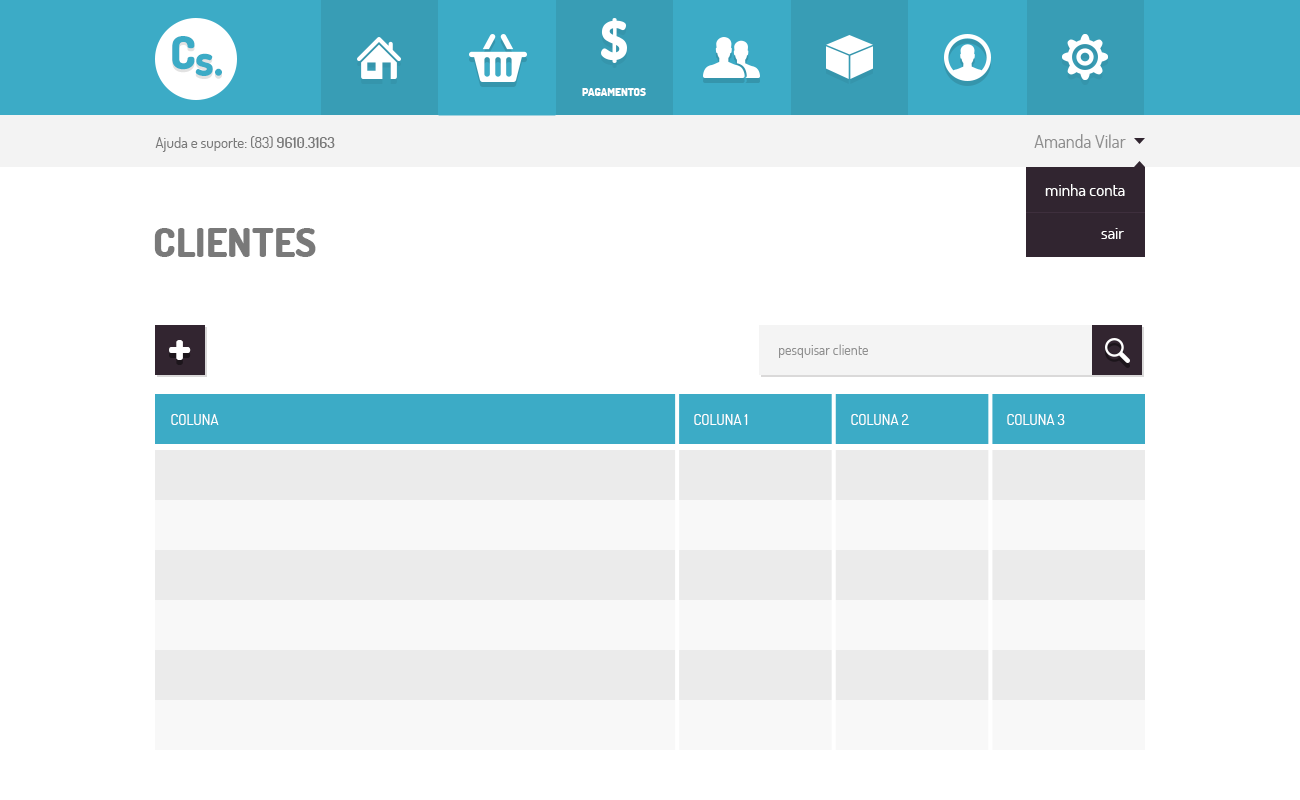
<style>
.page{position:relative;width:1300px;height:800px;background:#ffffff}
.page>*{position:absolute;margin:0}
.t1{font:11px "Dosis-ExtraBold";color:#ffffff;text-transform:uppercase}
.t2{font:15px "Dosis-Regular";color:#797979}
.t3{font:15px "Dosis-SemiBold";color:#797979}
.t4{font:18px "Dosis-Regular";color:#8f8f8f}
.t5{font:17px "Dosis-Regular";color:#ffffff}
.t6{font:40px "Dosis-ExtraBold";color:#797979;text-transform:uppercase}
.t7{font:50.5px "Dosis-ExtraBold";color:#ffffff;text-transform:uppercase}
.t8{font:14.1px "Dosis-Regular";color:#8f8f8f}
.t9{font:15px "Dosis-Regular";color:#ffffff;text-transform:uppercase}
.t10{font:17px "Dosis-ExtraBold";color:#ffffff;text-transform:uppercase}
</style>
<div class="page">
<p class="t1" style="left:582px;top:88px;width:64px;height:8px">PAGAMENTOS</p>
<p class="t2" style="left:155px;top:136px;width:180px;height:16px">Ajuda e suporte: (83) <span class="t3">9610.3163</span></p>
<p class="t2" style="left:155px;top:136px;width:180px;height:16px">Ajuda e suporte: (83) <span class="t3">9610.3163</span></p>
<p class="t4" style="left:1034px;top:134px;width:92px;height:14px">Amanda Vilar</p>
<p class="t4" style="left:1034px;top:134px;width:92px;height:14px">Amanda Vilar</p>
<p class="t5" style="left:1045px;top:184px;width:80px;height:12px">minha conta</p>
<p class="t5" style="left:1045px;top:184px;width:80px;height:12px">minha conta</p>
<p class="t6" style="left:154px;top:228px;width:162px;height:29px">Clientes</p>
<p class="t5" style="left:1101px;top:228px;width:23px;height:11px">sair</p>
<p class="t5" style="left:1101px;top:228px;width:23px;height:11px">sair</p>
<p class="t7" style="left:169px;top:340px;width:22px;height:20px">+</p>
<p class="t8" style="left:779px;top:344px;width:89px;height:14px">pesquisar cliente</p>
<p class="t9" style="left:171px;top:414px;width:48px;height:11px">coluna</p>
<p class="t9" style="left:694px;top:414px;width:54px;height:11px">coluna 1</p>
<p class="t9" style="left:851px;top:414px;width:58px;height:11px">coluna 2</p>
<p class="t9" style="left:1007px;top:414px;width:58px;height:11px">coluna 3</p>
<p class="t10" style="left:781px;top:634px;width:120px;height:20px">CONFIGURAçÕES</p>
</div>
